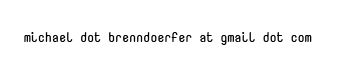
<style>
.page{position:relative;width:341px;height:75px;background:#ffffff}
.page>*{position:absolute;margin:0}
.t1{font:12.5px "NovaMonoForPowerline";color:#000000}
</style>
<div class="page">
<p class="t1" style="left:24px;top:32px;width:288px;height:13px">michael dot brenndoerfer at gmail dot com</p>
</div>
